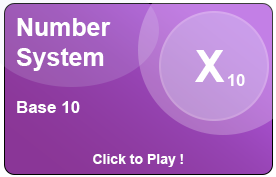
<style>
.page{position:relative;width:276px;height:177px}
.page>*{position:absolute;margin:0}
.t1{font:25px "Arial-BoldMT";color:#ffffff}
.t2{font:44px "Arial-BoldMT";color:#ffffff}
.t3{font:16.5px "Arial-BoldMT";color:#ffffff}
.t4{font:17px "Arial-BoldMT";color:#ffffff}
.t5{font:14px "Arial-BoldMT";color:#ffffff}
</style>
<div class="page">
<p class="t1" style="left:16px;top:18px;width:95px;height:53px">Number<br>System</p>
<p class="t2" style="left:195px;top:50px;width:30px;height:32px">X</p>
<p class="t3" style="left:228px;top:74px;width:17px;height:12px">10</p>
<p class="t4" style="left:17px;top:101px;width:63px;height:12px">Base 10</p>
<p class="t5" style="left:93px;top:154px;width:90px;height:13px">Click to Play !</p>
</div>
